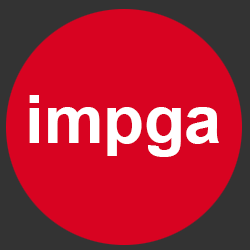
<style>
.page{position:relative;width:250px;height:250px;background:#d80321}
.page>*{position:absolute;margin:0}
.t1{font:66.7px "Arial-BoldMT";color:#ffffff}
</style>
<div class="page">
<p class="t1" style="left:29px;top:95px;width:190px;height:62px">impga</p>
</div>
